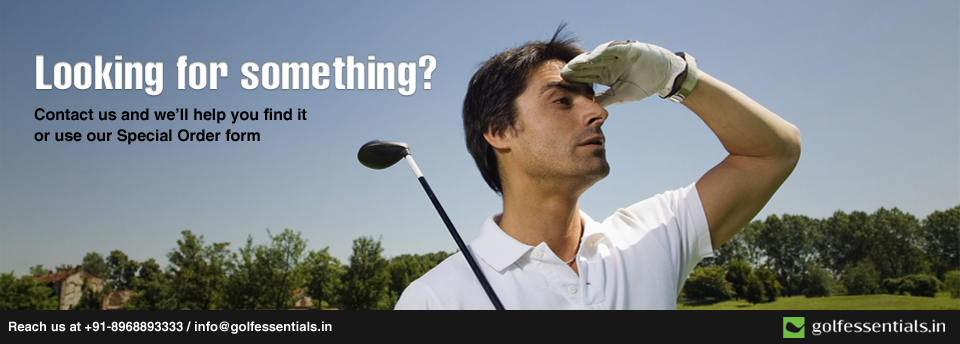
<style>
.page{position:relative;width:960px;height:344px}
.page>*{position:absolute;margin:0}
.t1{font:48px "HelveticaLT-Compressed";color:#ffffff}
.t2{font:16px/21px "HelveticaLT-Bold";color:#000000}
.t3{font:13px "HelveticaLT-Bold";color:#ffffff}
</style>
<div class="page">
<p class="t1" style="left:36px;top:54px;width:401px;height:42px">Looking for something?</p>
<p class="t2" style="left:34px;top:108px;width:273px;height:37px">Contact us and we’ll help you find it<br>or use our Special Order form</p>
<p class="t3" style="left:9px;top:321px;width:323px;height:13px">Reach us at +91-8968893333 / info@golfessentials.in</p>
</div>
